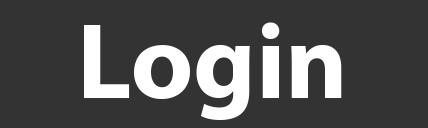
<style>
.page{position:relative;width:428px;height:128px;background:#333333}
.page>*{position:absolute;margin:0}
.t1{font:107.6px "MyriadPro-Bold";color:#ffffff}
</style>
<div class="page">
<p class="t1" style="left:84px;top:22px;width:258px;height:98px">Login</p>
</div>
